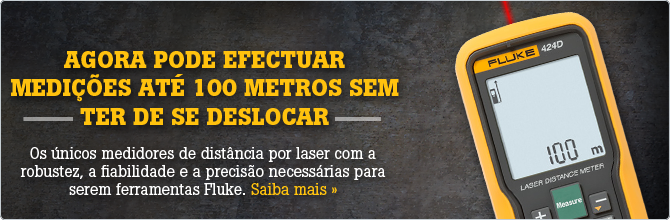
<style>
.page{position:relative;width:670px;height:220px}
.page>*{position:absolute;margin:0}
.t1{font:24px "BotonPro-Bold";color:#ffc20e;text-transform:uppercase}
.t2{font:16px/18px "BotonPro-Regular";color:#ffffff}
.t3{font:16px/18px "BotonPro-Regular";color:#ffc20e}
</style>
<div class="page">
<p class="t1" style="left:11px;top:51px;width:388px;height:74px;text-align:center">AGORA PODE EFECTUAR MEDIÇÕES ATÉ 100 METROS SEM TER DE SE DESLOCAR</p>
<p class="t2" style="left:20px;top:147px;width:366px;height:48px;text-align:center">Os únicos medidores de distância por laser com a robustez, a fiabilidade e a precisão necessárias para serem ferramentas Fluke. <span class="t3">Saiba mais »</span></p>
</div>
